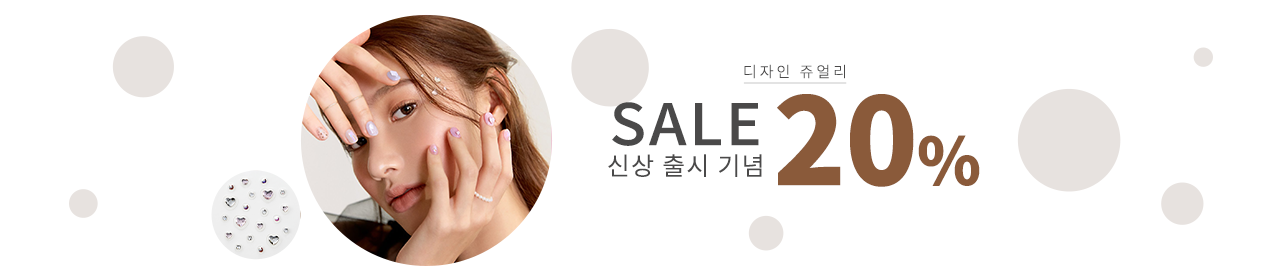
<style>
.page{position:relative;width:1280px;height:280px;background:#ffffff}
.page>*{position:absolute;margin:0}
.t1{font:15px "NotoSansCJKkr-Light";letter-spacing:0.2em;color:#4a4949}
.t2{font:25px "NotoSansCJKkr-DemiLight";letter-spacing:0.05em;color:#4a4949}
.t3{font:57px "NotoSansCJKkr-Medium";letter-spacing:0.05em;color:#4a4949;scale:1.05 1}
.t4{font:120px "NotoSansCJKkr-Black";letter-spacing:-0.01em;color:#8a5a3a}
.t5{font:65px "NotoSansCJKkr-Black";letter-spacing:-0.01em;color:#8a5a3a}
</style>
<div class="page">
<p class="t1" style="left:744px;top:64px;width:101px;height:15px">디자인 쥬얼리</p>
<p class="t2" style="left:608px;top:102px;width:154px;height:75px;text-align:center"><span class="t3">SALE<br></span>신상 출시 기념</p>
<p class="t4" style="left:777px;top:94px;width:203px;height:93px">20<span class="t5">%</span></p>
</div>
